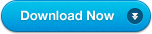
<style>
.page{position:relative;width:152px;height:34px}
.page>*{position:absolute;margin:0}
.t1{font:13px "HelveticaNeue-Bold";color:#fafafa}
</style>
<div class="page">
<p class="t1" style="left:21px;top:10px;width:94px;height:11px">Download Now</p>
</div>
